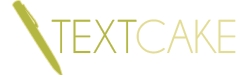
<style>
.page{position:relative;width:250px;height:75px;background:#ffffff}
.page>*{position:absolute;margin:0}
.t1{font:48px "Champagne&Limousines";color:#b4b843}
.t2{font:48px "Champagne&Limousines";color:#e3dc94}
</style>
<div class="page">
<p class="t1" style="left:51px;top:19px;width:185px;height:35px">TEXT<span class="t2">CAKE</span></p>
</div>
